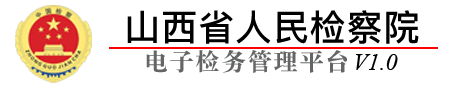
<style>
.page{position:relative;width:468px;height:87px;background:#ffffff}
.page>*{position:absolute;margin:0}
.t1{font:36px "PingFangSC-Medium";letter-spacing:0.03em;color:#000000}
.t2{font:24px "STSongti-SC-Black";letter-spacing:0.08em;color:#646565}
.t3{font:24px "TimesNewRomanPS-ItalicMT";color:#000000}
</style>
<div class="page">
<p class="t1" style="left:127px;top:10px;width:292px;height:34px">山西省人民检察院</p>
<p class="t2" style="left:146px;top:50px;width:201px;height:23px">电子检务管理平台</p>
<p class="t3" style="left:356px;top:54px;width:42px;height:16px">V1.0</p>
</div>
